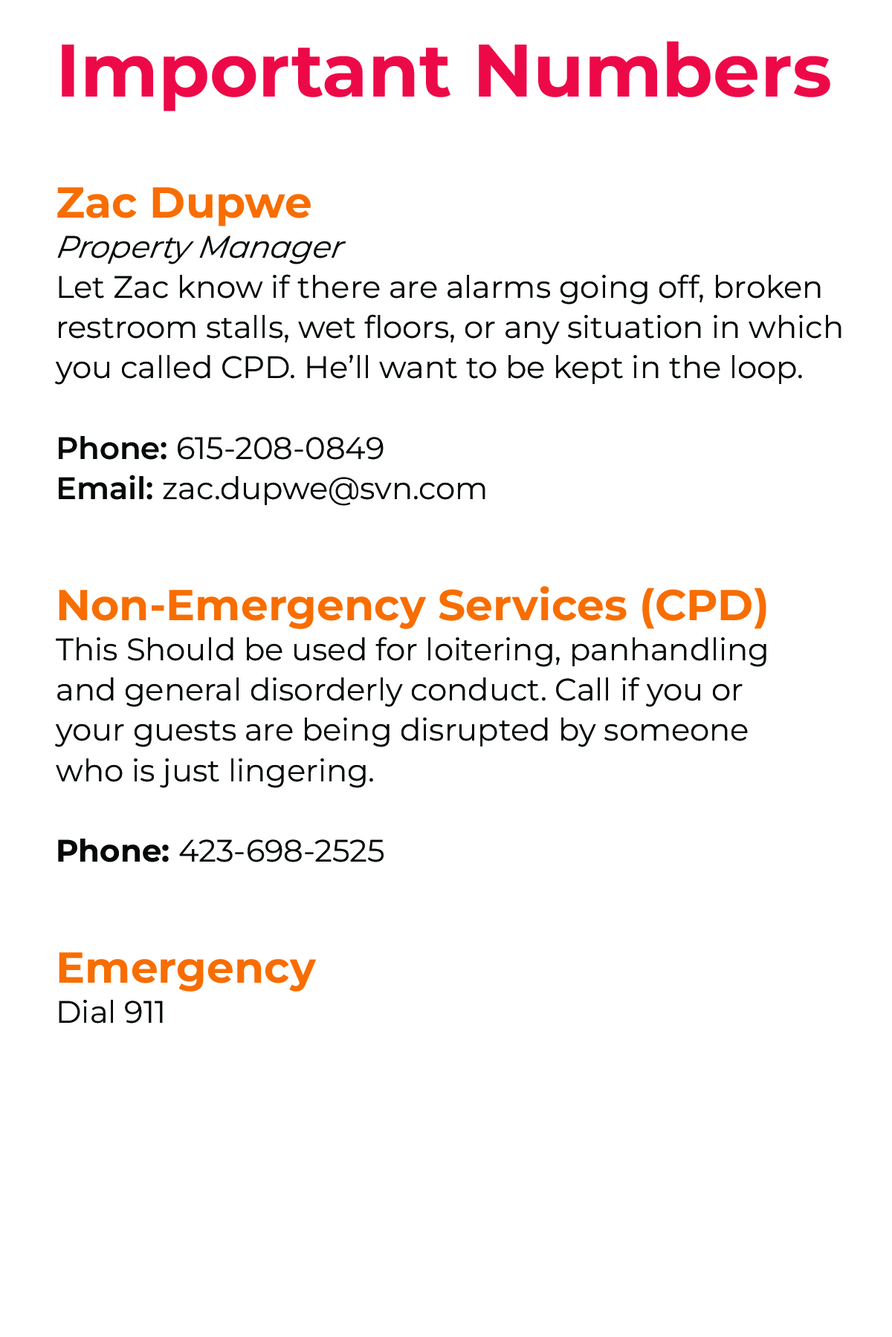
<style>
.page{position:relative;width:892px;height:1337px;background:#ffffff}
.page>*{position:absolute;margin:0}
.t1{font:31px/40.3px "Montserrat-Regular";color:#060808}
.t2{font:74.3px/40.3px "Montserrat-Bold";color:#ed0947}
.t3{font:43.3px/40.3px "Montserrat-Bold";color:#f86d00}
.t4{font:31px/40.3px "Montserrat-Italic";color:#060808;font-style:italic}
.t5{font:31px/40.3px "Montserrat-SemiBold";color:#060808}
.t6{font:31px/40.3px "Montserrat-Bold";color:#060808}
</style>
<div class="page">
<p class="t1" style="left:55px;top:41px;width:786px;height:983px"><span class="t2">Important Numbers<br><br><br></span><span class="t3">Zac Dupwe <br></span><span class="t4">Property Manager<br></span>Let Zac know if there are alarms going off, broken<br>restroom stalls, wet floors, or any situation in which <br>you called CPD. He’ll want to be kept in the loop. <br><span class="t5"><br>Phone: </span>615-208-0849<br><span class="t5">Email: </span>zac.dupwe@svn.com<br><br><br><span class="t3">Non-Emergency Services (CPD)<br></span>This Should be used for loitering, panhandling<br>and general disorderly conduct. Call if you or <br>your guests are being disrupted by someone<br>who is just lingering. <br><br><span class="t6">Phone: </span>423-698-2525<br><br><br><span class="t3">Emergency<br></span>Dial 911</p>
</div>
